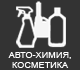
<style>
.page{position:relative;width:80px;height:70px;background:#333333}
.page>*{position:absolute;margin:0}
.t1{font:8px "ArialMT";color:#ffffff;scale:1.14 1}
</style>
<div class="page">
<p class="t1" style="left:8px;top:52px;width:63px;height:16px;text-align:center">АВТО-ХИМИЯ,<br>КОСМЕТИКА</p>
</div>
